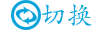
<style>
.page{position:relative;width:100px;height:30px;background:#ffffff}
.page>*{position:absolute;margin:0}
.t1{font:26px "STKaiti";color:#09a3dc}
</style>
<div class="page">
<p class="t1" style="left:41px;top:4px;width:51px;height:22px">切换</p>
</div>
